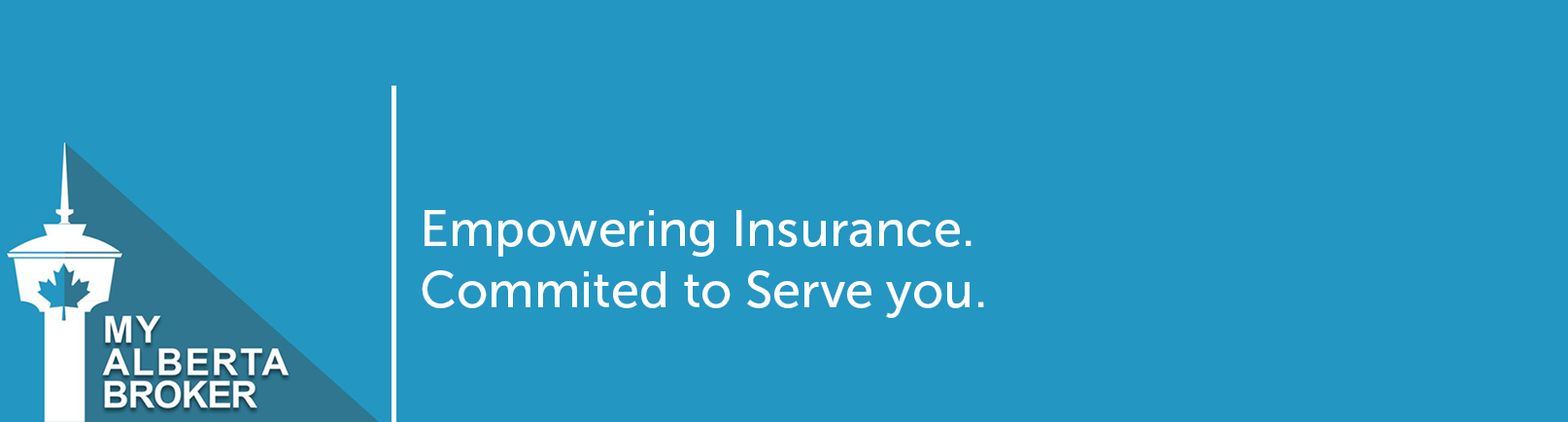
<style>
.page{position:relative;width:1568px;height:422px;background:#2396c2}
.page>*{position:absolute;margin:0}
.t1{font:50.6px "MuseoSans-500";color:#ffffff}
</style>
<div class="page">
<p class="t1" style="left:422px;top:210px;width:562px;height:108px">Empowering Insurance. <br>Commited to Serve you.</p>
</div>
